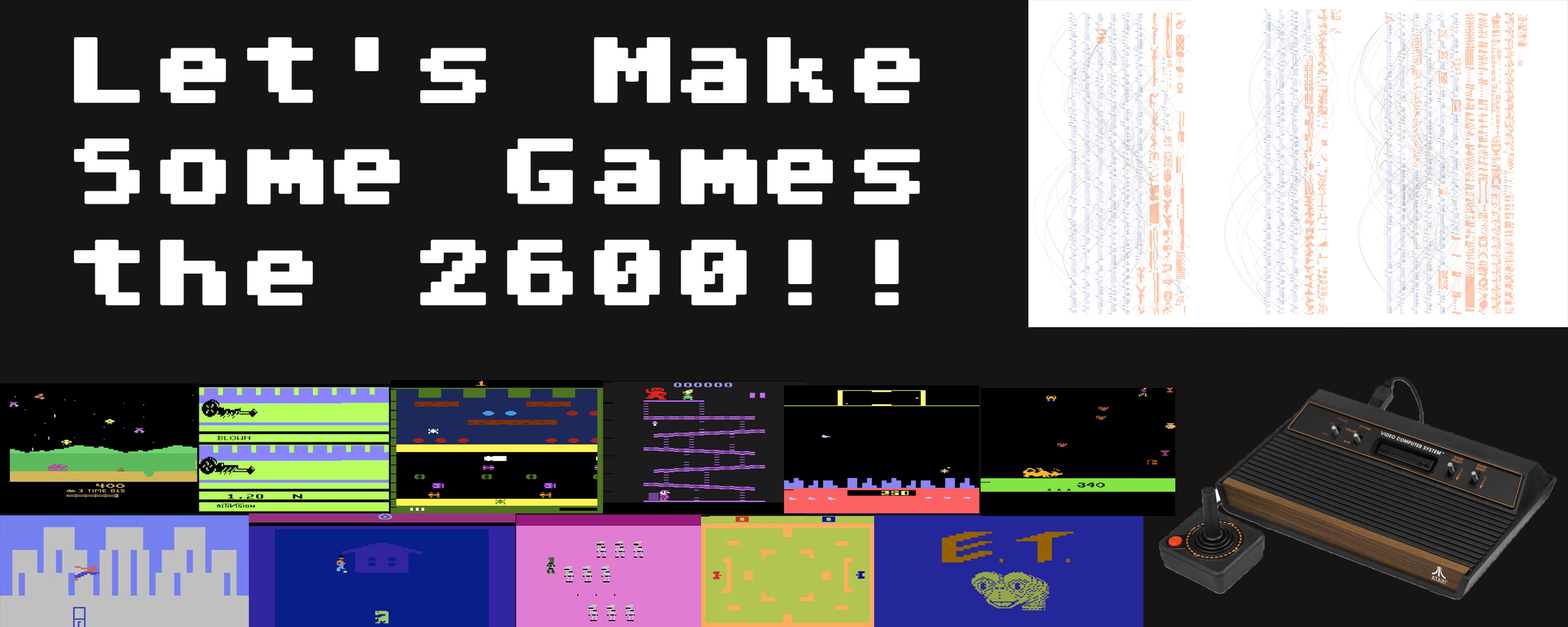
<style>
.page{position:relative;width:1568px;height:627px;background:#171414}
.page>*{position:absolute;margin:0}
.t1{font:84.4px "AtariClassic-Regular";color:#ffffff;font-weight:bold}
</style>
<div class="page">
<p class="t1" style="left:74px;top:37px;width:846px;height:269px">Let‘s Make<br>Some Games<br>the 2600!!</p>
</div>
